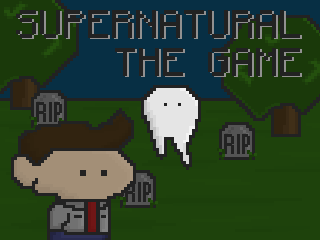
<style>
.page{position:relative;width:320px;height:240px;background:#1e420c}
.page>*{position:absolute;margin:0}
.t1{font:32px "Minecraftia";color:#222222;text-transform:uppercase}
.t2{font:32px "Minecraftia";text-transform:uppercase}
</style>
<div class="page">
<p class="t1" style="left:16px;top:10px;width:284px;height:28px">Supernatural</p>
<p class="t2" style="left:18px;top:11px;width:284px;height:28px">Supernatural</p>
<p class="t1" style="left:115px;top:48px;width:185px;height:28px">The game</p>
<p class="t2" style="left:117px;top:49px;width:185px;height:28px">The game</p>
</div>
